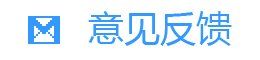
<style>
.page{position:relative;width:260px;height:60px;background:#ffffff}
.page>*{position:absolute;margin:0}
.t1{font:36px "MicrosoftYaHei";color:#3399ff}
</style>
<div class="page">
<p class="t1" style="left:88px;top:11px;width:144px;height:35px">意见反馈</p>
</div>
